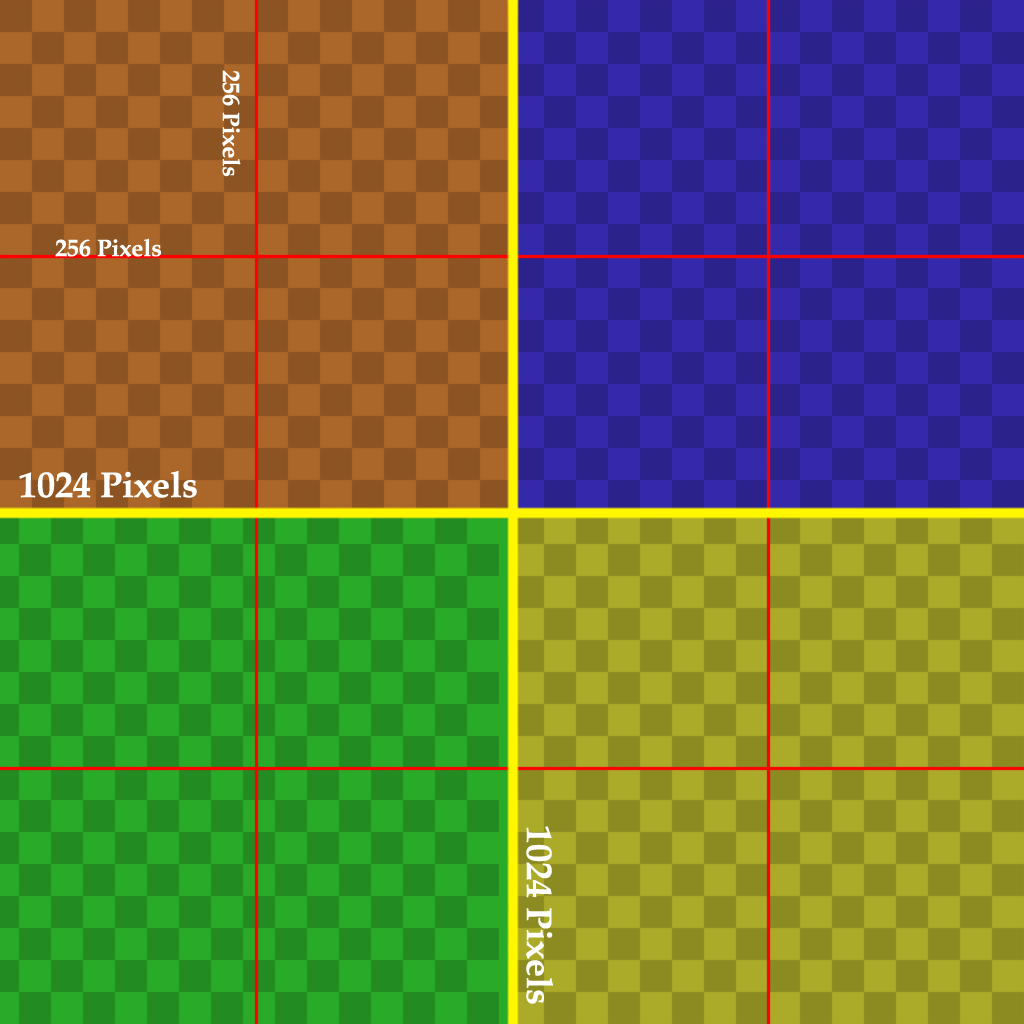
<style>
.page{position:relative;width:1024px;height:1024px}
.page>*{position:absolute;margin:0}
.t1{font:23.9px "BookAntiqua-Bold";color:#ffffff}
.t2{font:36px "BookAntiqua-Bold";color:#ffffff}
</style>
<div class="page">
<p class="t1" style="left:222px;top:70px;width:19px;height:107px;rotate:90deg">256 Pixels</p>
<p class="t1" style="left:55px;top:238px;width:106px;height:19px">256 Pixels</p>
<p class="t2" style="left:19px;top:470px;width:178px;height:28px">1024 Pixels</p>
<p class="t2" style="left:526px;top:826px;width:28px;height:178px;rotate:90deg">1024 Pixels</p>
</div>
